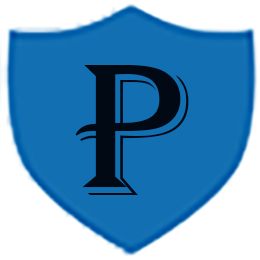
<style>
.page{position:relative;width:260px;height:260px;background:#126fb2}
.page>*{position:absolute;margin:0}
.t1{font:195px "Algerian";color:#000000}
</style>
<div class="page">
<p class="t1" style="left:75px;top:65px;width:114px;height:130px;opacity:0.94">P</p>
</div>
